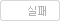
<style>
.page{position:relative;width:60px;height:21px;background:#ffffff}
.page>*{position:absolute;margin:0}
.t1{font:12px "morris9";color:#b3b3b3}
</style>
<div class="page">
<p class="t1" style="left:28px;top:6px;width:18px;height:10px">실패</p>
</div>
